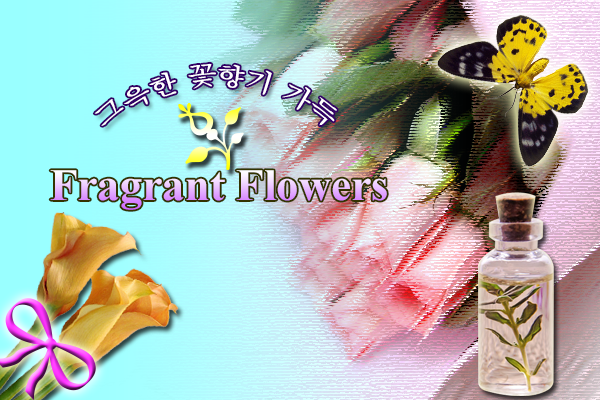
<style>
.page{position:relative;width:600px;height:400px}
.page>*{position:absolute;margin:0}
.t1{font:25px/20px "Batang";color:#ffffff}
.t2{font:45px "TimesNewRomanPS-BoldMT"}
</style>
<div class="page">
<p class="t1" style="left:94px;top:63px;width:243px;height:63px">그윽한 꽃향기 가득</p>
<p class="t2" style="left:50px;top:170px;width:337px;height:40px">Fragrant Flowers</p>
</div>
